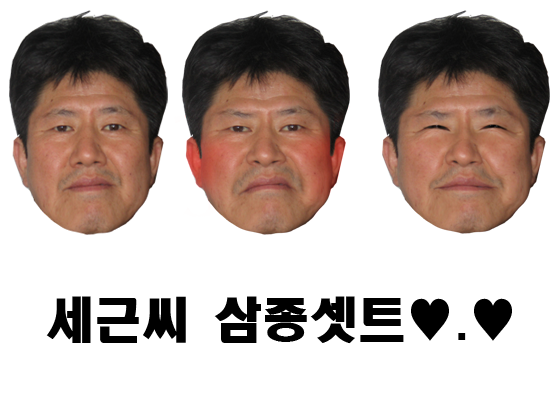
<style>
.page{position:relative;width:550px;height:400px;background:#ffffff}
.page>*{position:absolute;margin:0}
.t1{font:48px "HeadlineR-HM";color:#000000}
</style>
<div class="page">
<p class="t1" style="left:46px;top:296px;width:466px;height:48px">세근씨 삼종셋트♥.♥</p>
</div>
